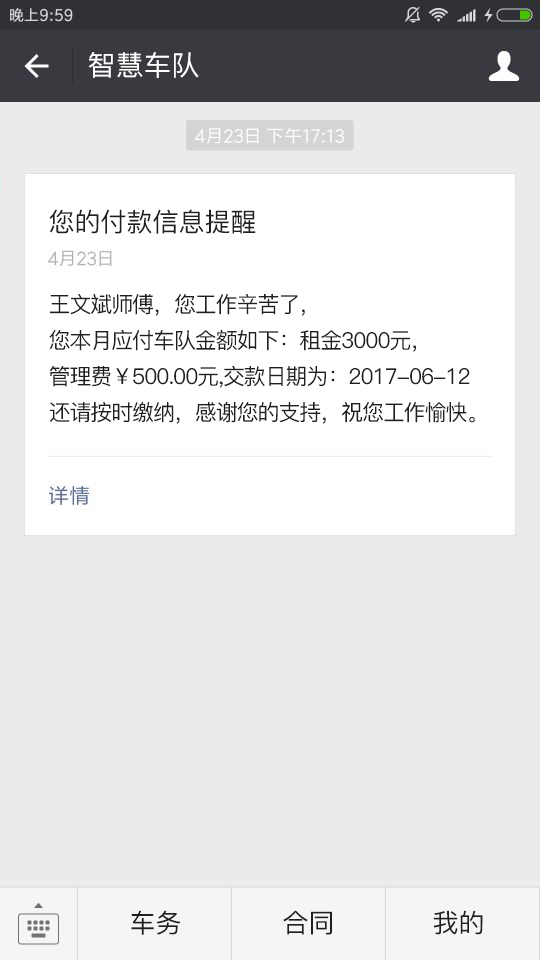
<style>
.page{position:relative;width:540px;height:960px;background:#ebebeb}
.page>*{position:absolute;margin:0}
.t1{font:28px "PingFang-SC-Medium";color:#ffffff}
.t2{font:26px "PingFang-SC-Medium";color:#201f1f}
.t3{font:22px/36px "PingFang-SC-Medium";letter-spacing:-0.05em;color:#201f1f}
</style>
<div class="page">
<p class="t1" style="left:88px;top:52px;width:111px;height:26px">智慧车队</p>
<p class="t2" style="left:49px;top:209px;width:207px;height:25px">您的付款信息提醒</p>
<p class="t3" style="left:49px;top:294px;width:426px;height:130px;text-align:justify">王文斌师傅，您工作辛苦了，<br>您本月应付车队金额如下：租金3000元，<br>管理费￥500.00元,交款日期为：2017-06-12<br>还请按时缴纳，感谢您的支持，祝您工作愉快。</p>
<p class="t2" style="left:131px;top:910px;width:50px;height:25px">车务</p>
<p class="t2" style="left:283px;top:910px;width:49px;height:25px">合同</p>
<p class="t2" style="left:433px;top:910px;width:50px;height:25px">我的</p>
</div>
